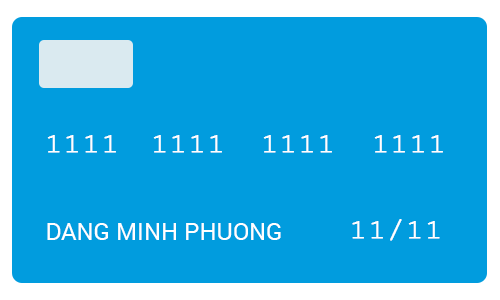
<style>
.page{position:relative;width:500px;height:300px;background:#019cde}
.page>*{position:absolute;margin:0}
.t1{font:28px "CourierNewPSMT";letter-spacing:0.05em;color:#ffffff;text-transform:uppercase;font-weight:bold}
.t2{font:24px "Roboto-Regular";color:#ffffff;text-transform:uppercase}
</style>
<div class="page">
<p class="t1" style="left:47px;top:135px;width:69px;height:18px">1111</p>
<p class="t1" style="left:153px;top:135px;width:69px;height:18px">1111</p>
<p class="t1" style="left:263px;top:135px;width:69px;height:18px">1111</p>
<p class="t1" style="left:374px;top:135px;width:69px;height:18px">1111</p>
<p class="t1" style="left:352px;top:219px;width:88px;height:22px">11/11</p>
<p class="t2" style="left:47px;top:223px;width:234px;height:17px">DANG MINH PHUONG</p>
</div>
